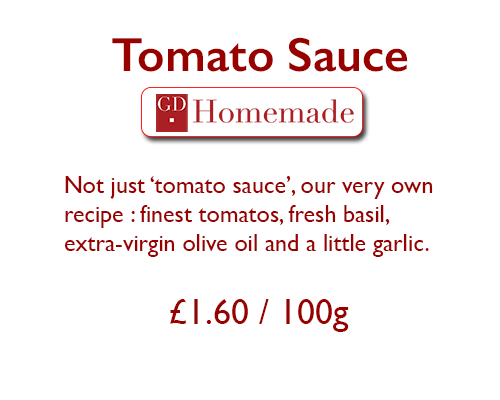
<style>
.page{position:relative;width:500px;height:400px;background:#ffffff}
.page>*{position:absolute;margin:0}
.t1{font:48px "GillSans-SemiBold";color:#980100}
.t2{font:24px "GillSans";color:#980100}
.t3{font:36px "GillSans";color:#980100}
</style>
<div class="page">
<p class="t1" style="left:112px;top:37px;width:296px;height:35px">Tomato Sauce</p>
<p class="t2" style="left:64px;top:176px;width:369px;height:81px">Not just ‘tomato sauce’, our very own recipe : finest tomatos, fresh basil, extra-virgin olive oil and a little garlic.</p>
<p class="t3" style="left:170px;top:299px;width:179px;height:33px">£1.60 / 100g</p>
</div>
